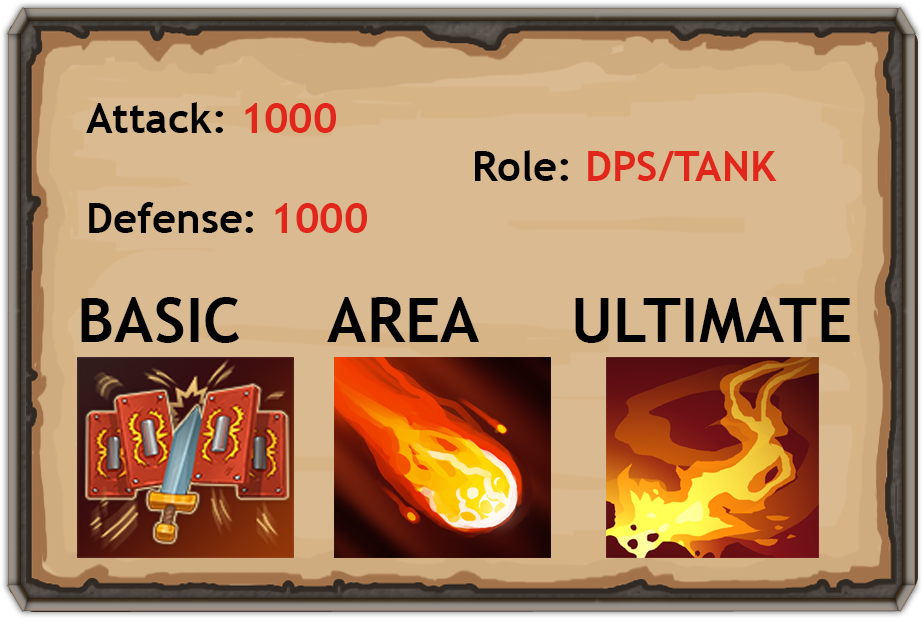
<style>
.page{position:relative;width:923px;height:619px;background:#daba91}
.page>*{position:absolute;margin:0}
.t1{font:41.7px "TrebuchetMS-Bold";color:#000000}
.t2{font:41.7px "TrebuchetMS-Bold";color:#e1261c}
.t3{font:62.5px "TrebuchetMS-Bold";color:#000000}
</style>
<div class="page">
<p class="t1" style="left:86px;top:102px;width:281px;height:131px">Attack: <span class="t2">1000 <br></span><br>Defense: <span class="t2">1000</span></p>
<p class="t2" style="left:475px;top:150px;width:302px;height:31px"><span class="t1">Role: </span>DPS/TANK</p>
<p class="t3" style="left:81px;top:297px;width:769px;height:46px">BASIC    AREA     ULTIMATE</p>
</div>
